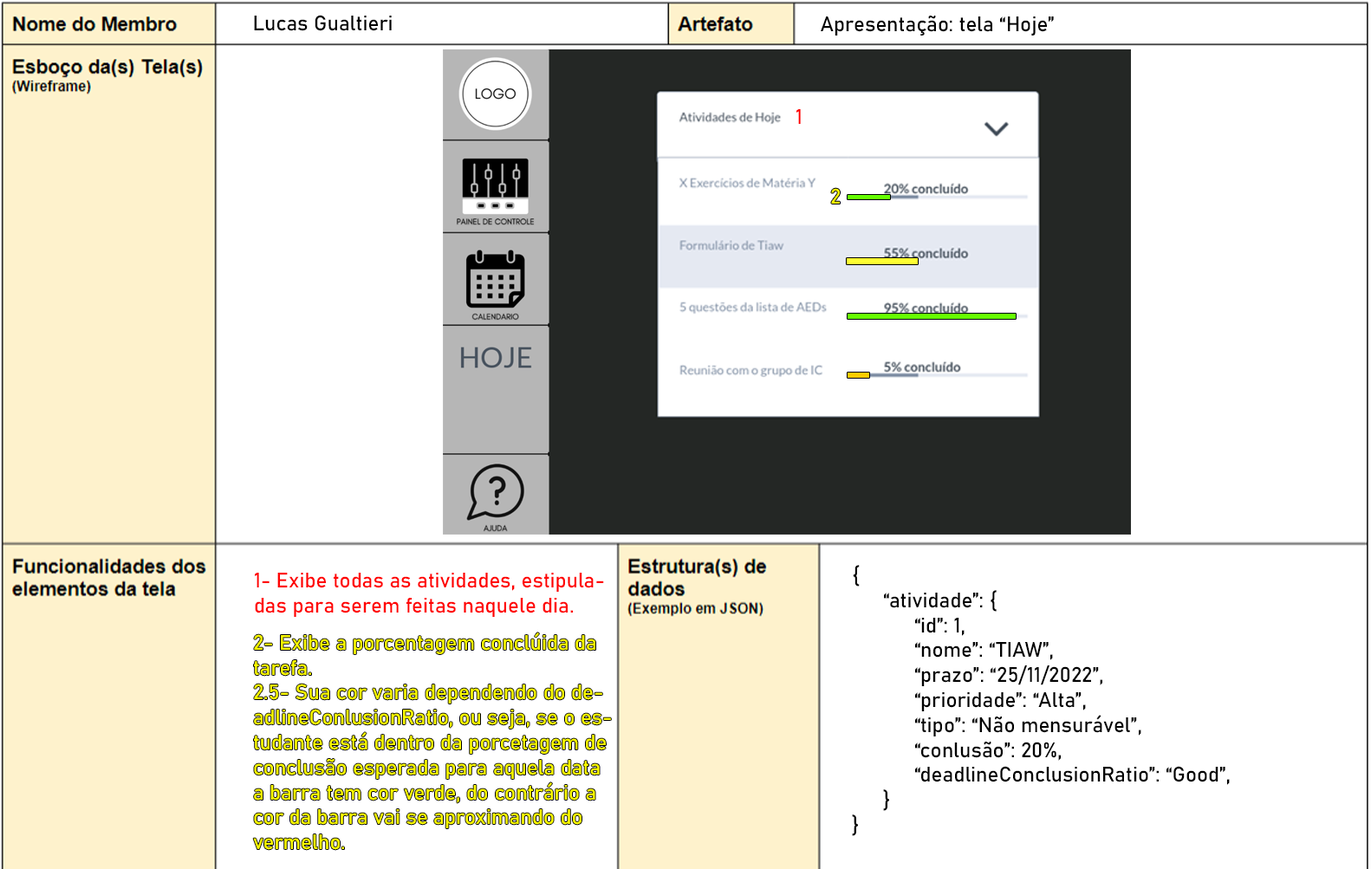
<style>
.page{position:relative;width:1371px;height:869px;background:#ffffff}
.page>*{position:absolute;margin:0}
.t1{font:20.8px "Bahnschrift";color:#000000}
.t2{font:20.8px "Bahnschrift";color:#ff0000}
.t3{font:20.8px "Bahnschrift";color:#ffff00}
</style>
<div class="page">
<p class="t1" style="left:254px;top:15px;width:138px;height:16px">Lucas Gualtieri</p>
<p class="t1" style="left:821px;top:16px;width:233px;height:20px">Apresentação: tela “Hoje”</p>
<p class="t2" style="left:797px;top:109px;width:4px;height:15px">1</p>
<p class="t1" style="left:852px;top:565px;width:378px;height:272px">{<br> “atividade”: {<br>  “id”: 1,<br>  “nome”: “TIAW”,<br>  “prazo”: “25/11/2022”,<br>  “prioridade”: “Alta”,<br>  “tipo”: “Não mensurável”, <br>  “conlusão”: 20%,<br>  “deadlineConclusionRatio”: “Good”,<br> }<br>}</p>
<p class="t2" style="left:255px;top:573px;width:349px;height:44px">1- Exibe todas as atividades, estipula-<br>das para serem feitas naquele dia.</p>
<p class="t3" style="left:253px;top:633px;width:358px;height:217px">2- Exibe a porcentagem conclúida da <br>tarefa.<br>2.5- Sua cor varia dependendo do de-<br>adlineConlusionRatio, ou seja, se o es-<br>tudante está dentro da porcetagem de<br>conclusão esperada para aquela data<br>a barra tem cor verde, do contrário a<br>cor da barra vai se aproximando do<br>vermelho.</p>
</div>
